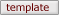
<style>
.page{position:relative;width:59px;height:15px}
.page>*{position:absolute;margin:0}
.t1{font:10px "Verdana";letter-spacing:-0.02em;color:#660000}
</style>
<div class="page">
<p class="t1" style="left:6px;top:3px;width:43px;height:10px">template</p>
</div>
